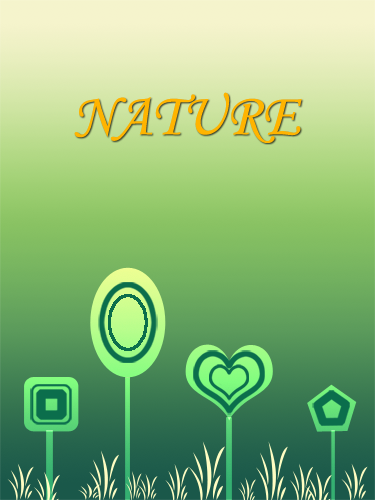
<style>
.page{position:relative;width:375px;height:500px}
.page>*{position:absolute;margin:0}
.t1{font:60px "MonotypeCorsiva";color:#ffb400}
</style>
<div class="page">
<p class="t1" style="left:74px;top:92px;width:228px;height:51px">NATURE</p>
</div>
